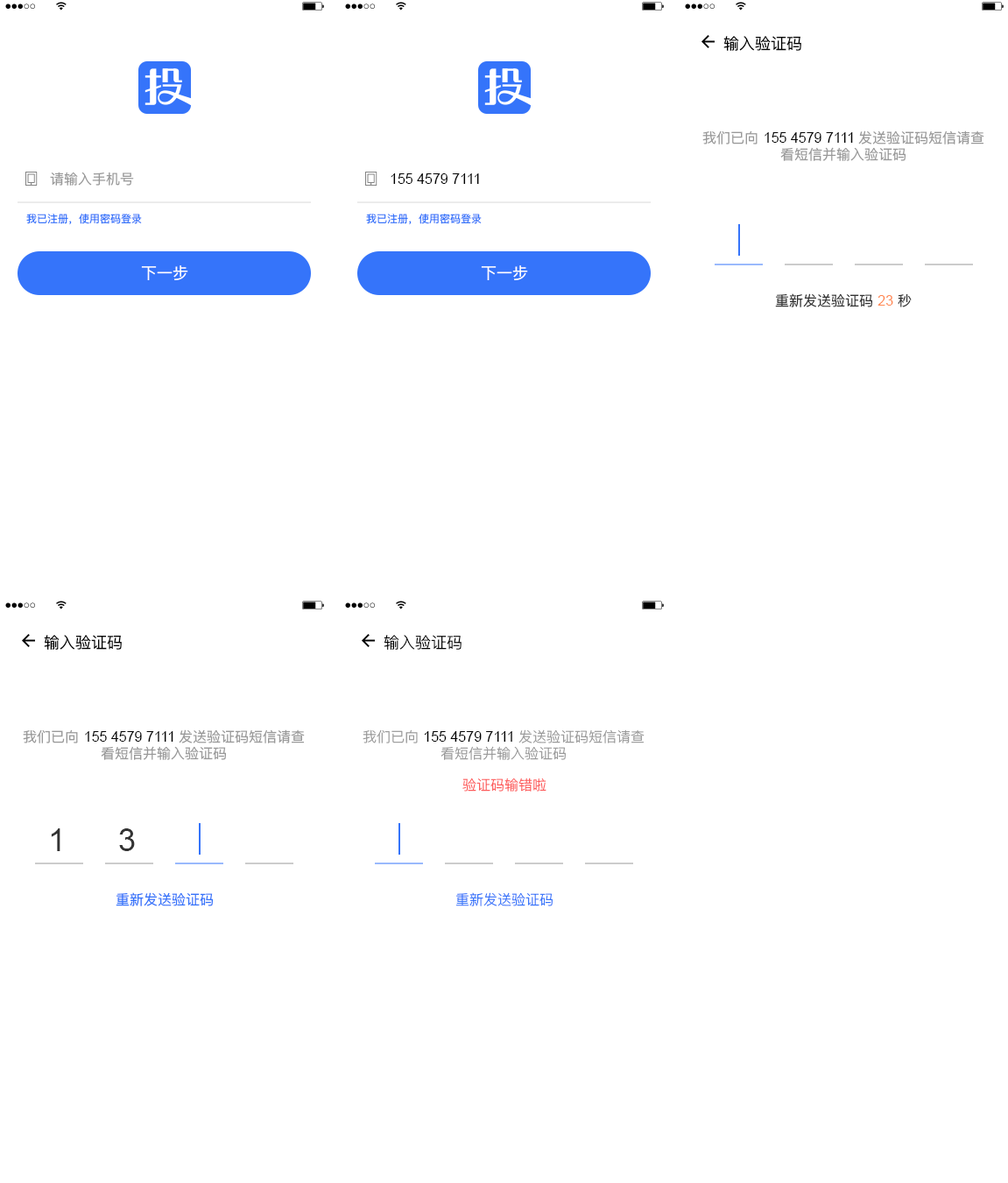
<style>
.page{position:relative;width:1008px;height:1183px;background:#ffffff}
.page>*{position:absolute;margin:0}
.t1{font:15.8px "PingFangSC-Regular";color:#000000}
.t2{font:14px "PingFangSC-Regular";color:#999999}
.t3{font:14px "ArialMT";color:#000000}
.t4{font:10.5px "PingFangSC-Regular";color:#3574fa}
.t5{font:15.8px "PingFangSC-Regular";color:#ffffff}
.t6{font:14px "PingFangSC-Regular";color:#333333}
.t7{font:14px "ArialMT";color:#ff8a54}
.t8{font:15.8px "PingFangSC-Light";color:#000000}
.t9{font:14px "PingFangSC-Light";color:#999999}
.t10{font:14px "PingFangSC-Light";color:#fd5b5b}
.t11{font:31.5px "ArialMT";color:#333333}
.t12{font:14px "PingFangSC-Regular";color:#3574fa}
.t13{font:14px "PingFangSC-Light";color:#3574fa}
</style>
<div class="page">
<p class="t1" style="left:723px;top:36px;width:78px;height:15px">输入验证码</p>
<p class="t2" style="left:702px;top:130px;width:282px;height:31px;text-align:center">我们已向 <span class="t3">155 4579 7111 </span>发送验证码短信请查看短信并输入验证码</p>
<p class="t2" style="left:50px;top:172px;width:84px;height:14px">请输入手机号</p>
<p class="t3" style="left:391px;top:173px;width:88px;height:11px">155 4579 7111</p>
<p class="t4" style="left:26px;top:214px;width:116px;height:11px">我已注册，使用密码登录</p>
<p class="t4" style="left:366px;top:214px;width:116px;height:11px">我已注册，使用密码登录</p>
<p class="t5" style="left:141px;top:265px;width:47px;height:15px">下一步</p>
<p class="t5" style="left:481px;top:265px;width:47px;height:15px">下一步</p>
<p class="t6" style="left:775px;top:293px;width:137px;height:14px">重新发送验证码 <span class="t7">23</span> 秒</p>
<p class="t1" style="left:44px;top:635px;width:78px;height:15px">输入验证码</p>
<p class="t8" style="left:384px;top:635px;width:77px;height:15px">输入验证码</p>
<p class="t2" style="left:23px;top:729px;width:282px;height:31px;text-align:center">我们已向 <span class="t3">155 4579 7111 </span>发送验证码短信请查看短信并输入验证码</p>
<p class="t9" style="left:363px;top:729px;width:282px;height:31px;text-align:center">我们已向 <span class="t3">155 4579 7111 </span>发送验证码短信请查看短信并输入验证码</p>
<p class="t10" style="left:462px;top:778px;width:84px;height:14px">验证码输错啦</p>
<p class="t11" style="left:51px;top:828px;width:9px;height:23px">1</p>
<p class="t11" style="left:119px;top:828px;width:16px;height:23px">3</p>
<p class="t12" style="left:116px;top:892px;width:97px;height:14px">重新发送验证码</p>
<p class="t13" style="left:455px;top:892px;width:98px;height:14px">重新发送验证码</p>
</div>
